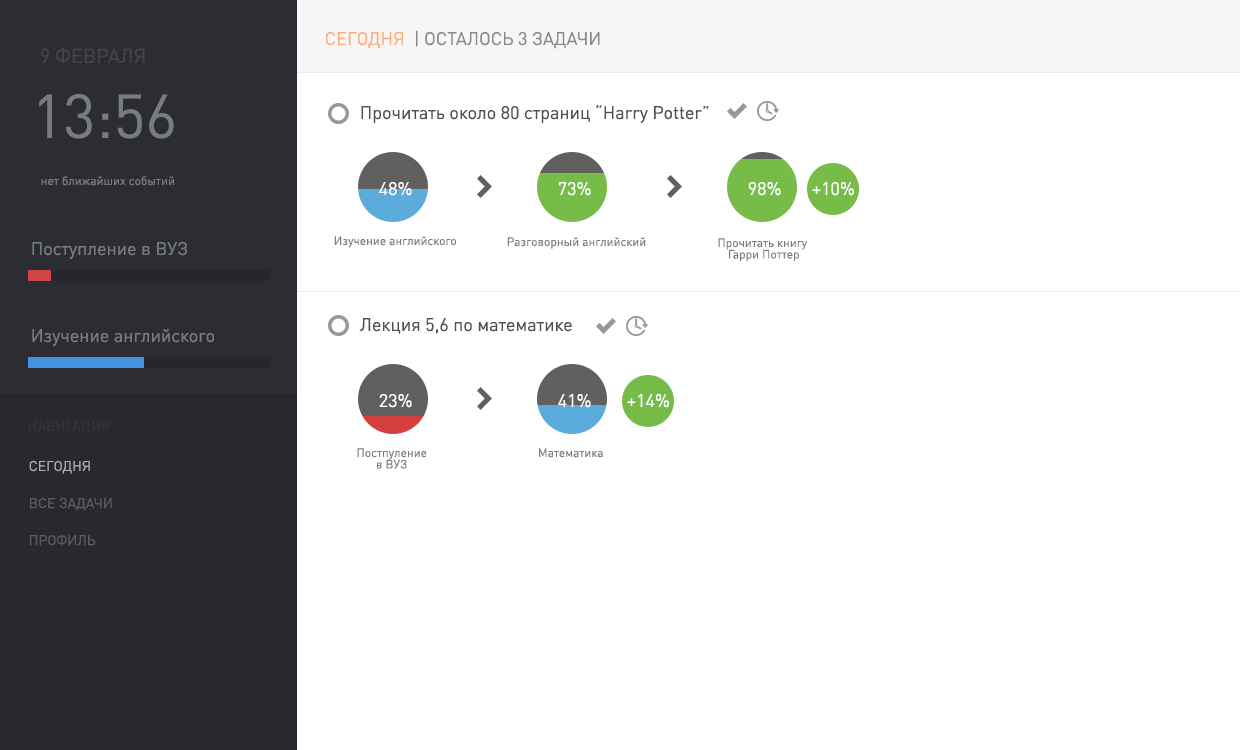
<style>
.page{position:relative;width:1240px;height:750px;background:#ffffff}
.page>*{position:absolute;margin:0}
.t1{font:18px "DINPro-Regular";color:#898989;text-transform:uppercase}
.t2{font:18px "DINPro-Regular";color:#faac7d;text-transform:uppercase}
.t3{font:20px "DINPro-Regular";color:#43454a}
.t4{font:61px "DINPro-Regular";color:#787b82}
.t5{font:18px "DINPro-Regular";color:#4e5054}
.t6{font:12px "DINPro-Regular";color:#787b82}
.t7{font:18px "DINPro-Regular";color:#ffffff}
.t8{font:18px "DINPro-Regular";color:#787b82}
.t9{font:12px "DINPro-Regular";color:#7d7e82}
.t10{font:14px "DINPro-Regular";color:#33353a}
.t11{font:14px/40px "DINPro-Regular";color:#5a5c61;text-transform:uppercase}
.t12{font:14px/40px "DINPro-Regular";color:#aeaeae;text-transform:uppercase}
</style>
<div class="page">
<p class="t1" style="left:416px;top:30px;width:184px;height:19px">| осталось 3 задачи</p>
<p class="t2" style="left:326px;top:32px;width:77px;height:17px">СЕГОДНЯ</p>
<p class="t3" style="left:40px;top:48px;width:105px;height:16px">9 ФЕВРАЛЯ</p>
<p class="t4" style="left:39px;top:94px;width:135px;height:45px">13:56</p>
<p class="t5" style="left:361px;top:104px;width:348px;height:19px">Прочитать около 80 страниц “Harry Potter”</p>
<p class="t6" style="left:41px;top:176px;width:133px;height:10px">нет ближайших событий</p>
<p class="t7" style="left:379px;top:182px;width:33px;height:14px">48%</p>
<p class="t7" style="left:559px;top:182px;width:32px;height:14px">73%</p>
<p class="t7" style="left:748px;top:182px;width:33px;height:14px">98%</p>
<p class="t7" style="left:812px;top:182px;width:42px;height:14px">+10%</p>
<p class="t8" style="left:32px;top:242px;width:155px;height:17px">Поступление в ВУЗ</p>
<p class="t9" style="left:334px;top:236px;width:122px;height:12px">Изучение английского</p>
<p class="t9" style="left:507px;top:237px;width:139px;height:12px">Разговорный английский</p>
<p class="t9" style="left:718px;top:238px;width:89px;height:24px;text-align:center">Прочитать книгу <br>Гарри Поттер</p>
<p class="t5" style="left:359px;top:318px;width:213px;height:16px">Лекция 5,6 по математике</p>
<p class="t8" style="left:32px;top:329px;width:182px;height:17px">Изучение английского</p>
<p class="t7" style="left:379px;top:394px;width:33px;height:14px">23%</p>
<p class="t7" style="left:558px;top:394px;width:33px;height:14px">41%</p>
<p class="t7" style="left:627px;top:394px;width:42px;height:14px">+14%</p>
<p class="t10" style="left:29px;top:421px;width:80px;height:13px">НАВИГАЦИЯ</p>
<p class="t9" style="left:357px;top:448px;width:70px;height:21px;text-align:center">Постпуление<br>в ВУЗ</p>
<p class="t9" style="left:539px;top:448px;width:64px;height:10px">Математика</p>
<p class="t11" style="left:29px;top:460px;width:83px;height:86px"><span class="t12">Сегодня<br></span>ВСЕ ЗАДАЧИ<br>ПРОФИЛЬ</p>
</div>
